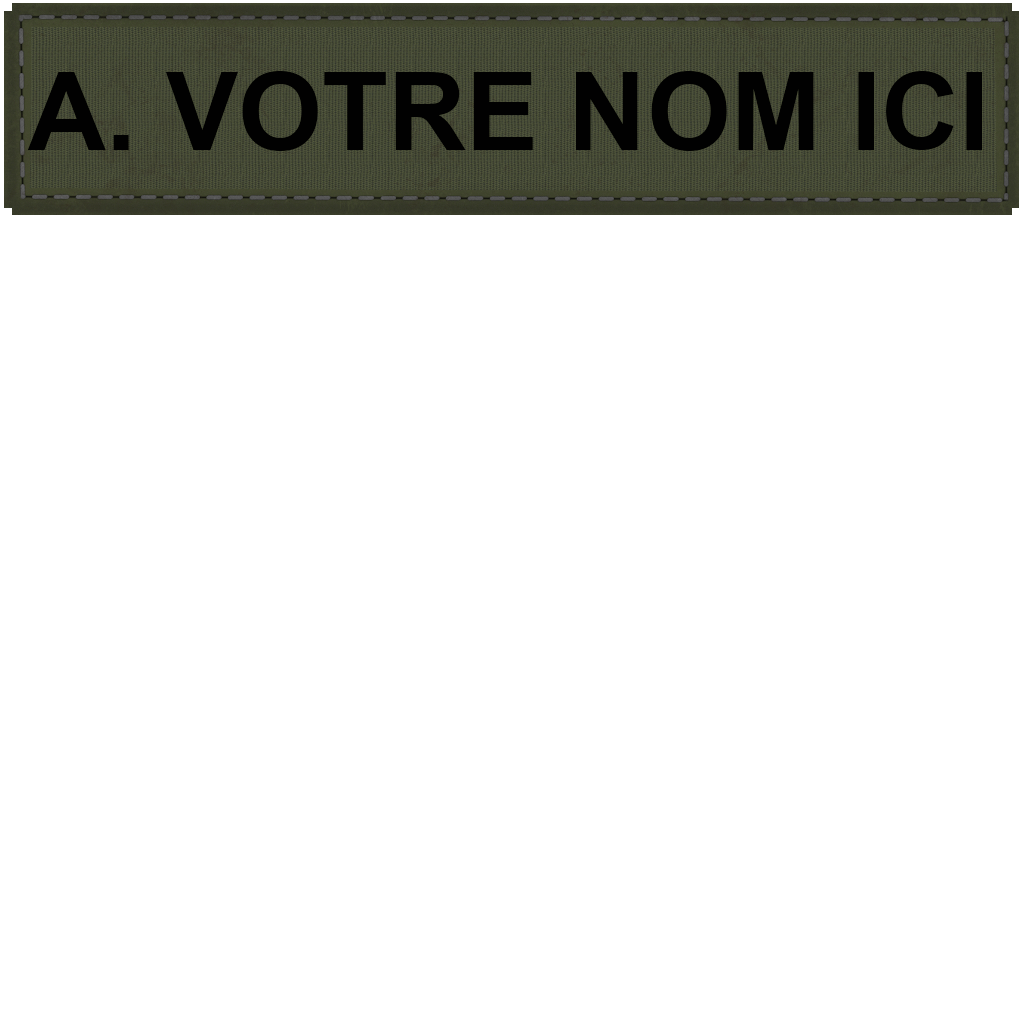
<style>
.page{position:relative;width:1024px;height:1024px;background:#ffffff}
.page>*{position:absolute;margin:0}
.t1{font:108.1px "Arial-BoldMT";color:#010101}
</style>
<div class="page">
<p class="t1" style="left:27px;top:71px;width:955px;height:80px">A. VOTRE NOM ICI</p>
</div>
